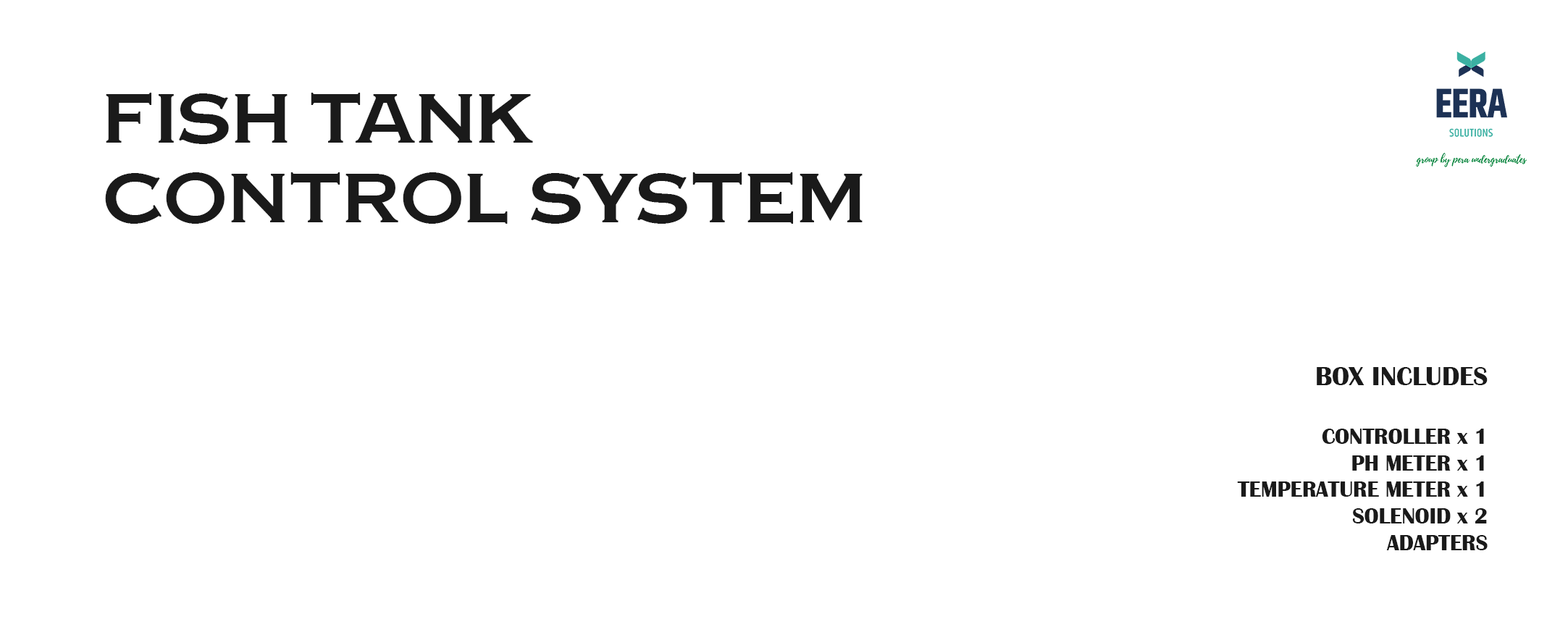
<style>
.page{position:relative;width:1568px;height:627px;background:#ffffff}
.page>*{position:absolute;margin:0}
.t1{font:66.4px "CopperPennyDTPNormal";color:#1a1a1a}
.t2{font:22.1px "BritannicBold";color:#1a1a1a}
.t3{font:26.6px "BritannicBold";color:#1a1a1a}
</style>
<div class="page">
<p class="t1" style="left:105px;top:93px;width:758px;height:131px">FISH TANK<br>CONTROL SYSTEM</p>
<p class="t2" style="left:1237px;top:367px;width:251px;height:183px;text-align:right"><span class="t3">BOX INCLUDES<br><br></span>CONTROLLER x 1<br>PH METER x 1<br>TEMPERATURE METER x 1<br>SOLENOID x 2<br>ADAPTERS</p>
</div>
